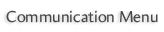
<style>
.page{position:relative;width:164px;height:32px;background:#ffffff}
.page>*{position:absolute;margin:0}
.t1{font:16px "Amira-Roman";color:#474747}
</style>
<div class="page">
<p class="t1" style="left:6px;top:10px;width:152px;height:13px">Communication Menu</p>
</div>
